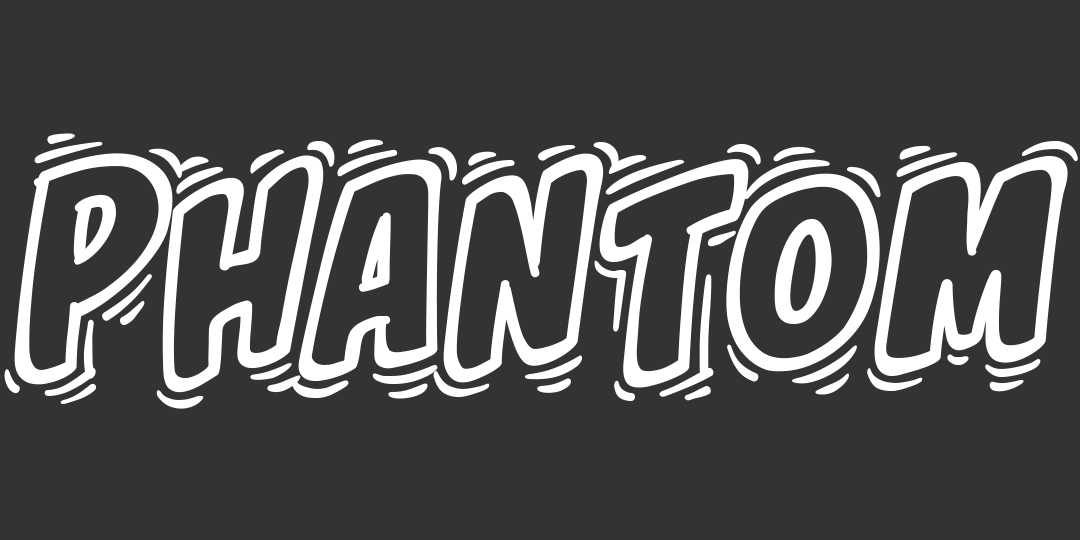
<style>
.page{position:relative;width:1080px;height:540px;background:#333333}
.page>*{position:absolute;margin:0}
.t1{font:283.3px "CCShakeOpen";color:#ffffff}
</style>
<div class="page">
<p class="t1" style="left:4px;top:133px;width:1074px;height:276px">PHANTOM</p>
</div>
